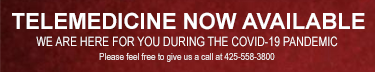
<style>
.page{position:relative;width:375px;height:72px}
.page>*{position:absolute;margin:0}
.t1{font:22.2px "Arial-BoldMT";color:#fefeff}
.t2{font:9.8px/13.6px "ArialNarrow";color:#fefeff}
.t3{font:12.9px/15.5px "ArialNarrow";color:#fefeff}
</style>
<div class="page">
<p class="t1" style="left:12px;top:12px;width:353px;height:18px">TELEMEDICINE NOW AVAILABLE</p>
<p class="t2" style="left:36px;top:36px;width:302px;height:26px;text-align:center"><span class="t3">WE ARE HERE FOR YOU DURING THE COVID-19 PANDEMIC<br></span>Please feel free to give us a call at 425-558-3800</p>
</div>
